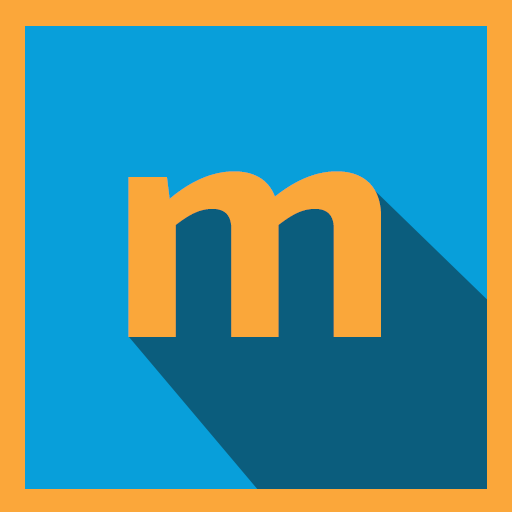
<style>
.page{position:relative;width:512px;height:512px;background:#089fda}
.page>*{position:absolute;margin:0}
.t1{font:320px "Byker-Bold";color:#faa73a}
</style>
<div class="page">
<p class="t1" style="left:128px;top:171px;width:253px;height:166px">m</p>
</div>
